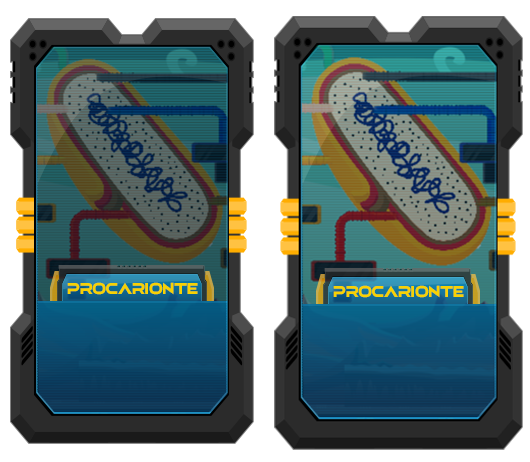
<style>
.page{position:relative;width:530px;height:462px}
.page>*{position:absolute;margin:0}
.t1{font:19.2px "elasisrg";letter-spacing:0.01em;color:#f7d203;scale:0.78 1}
</style>
<div class="page">
<p class="t1" style="left:67px;top:282px;width:131px;height:13px">PROCARIONTE</p>
<p class="t1" style="left:333px;top:285px;width:131px;height:13px">PROCARIONTE</p>
</div>
